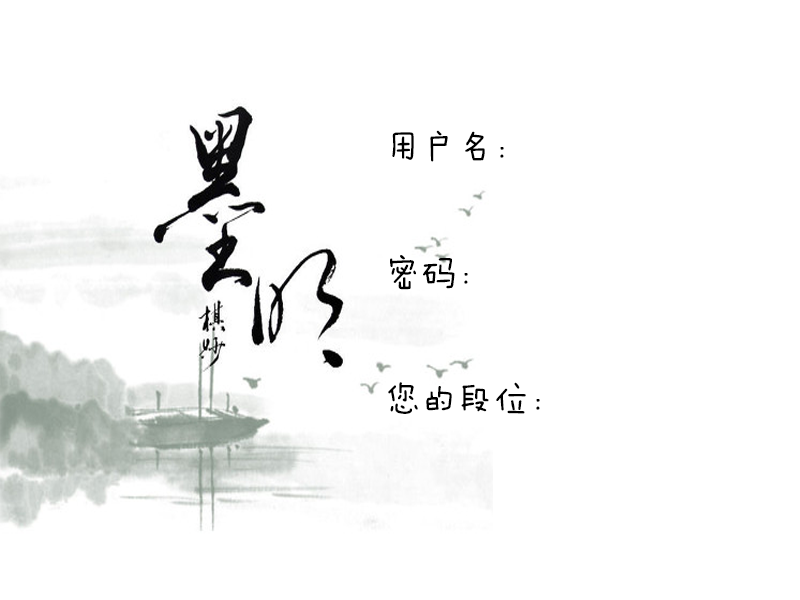
<style>
.page{position:relative;width:800px;height:600px;background:#ffffff}
.page>*{position:absolute;margin:0}
.t1{font:36px "FZMWJW--GB1-0";color:#000000}
</style>
<div class="page">
<p class="t1" style="left:388px;top:130px;width:152px;height:284px">用户名：<br><br>密码：<br><br>您的段位：</p>
</div>
